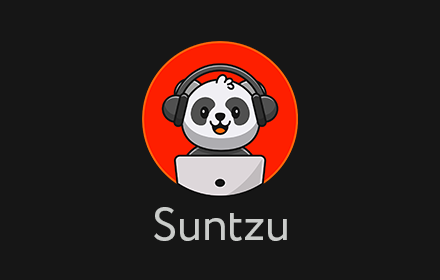
<style>
.page{position:relative;width:440px;height:280px;background:#161616}
.page>*{position:absolute;margin:0}
.t1{font:46.2px "Circe-Regular";color:#caccca}
</style>
<div class="page">
<p class="t1" style="left:154px;top:207px;width:133px;height:34px">Suntzu</p>
</div>
